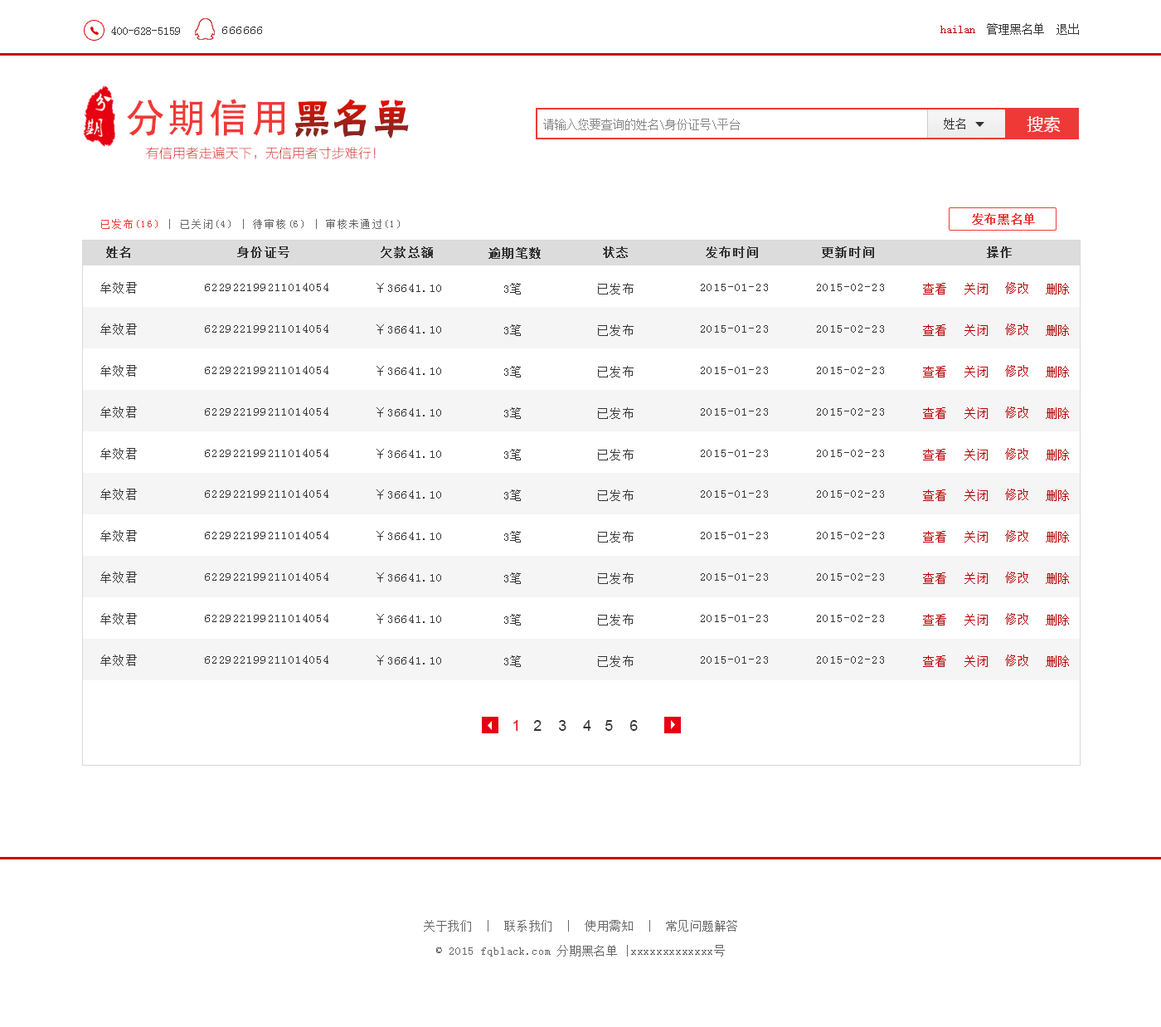
<style>
.page{position:relative;width:1161px;height:1027px;background:#ffffff}
.page>*{position:absolute;margin:0}
.t1{font:11.6px "SimSun";color:#333333}
.t2{font:11.6px "SimSun";color:#333333;font-weight:bold}
.t3{font:11.6px "SimSun";letter-spacing:0.1em;color:#333333}
.t4{font:11.6px "SimSun";color:#b60000}
.t5{font:39.8px "AdobeHeitiStd-Regular";letter-spacing:0.05em;color:#ef3936}
.t6{font:11.6px "SimSun";color:#888888}
.t7{font:16.6px "MicrosoftYaHei";color:#ffffff}
.t8{font:13.3px "FZLTCXHJW--GB1-0";color:#d90000}
.t9{font:10px "SimSun";letter-spacing:0.15em;color:#666666}
.t10{font:10px "SimSun";letter-spacing:0.15em;color:#ef3936}
.t11{font:11.6px "SimSun";letter-spacing:0.05em;color:#ef3936;font-weight:bold}
.t12{font:11.6px "SimSun";letter-spacing:0.1em;color:#333333;font-weight:bold}
.t13{font:11.6px "SimSun";letter-spacing:0.1em;color:#b60000}
.t14{font:14.9px "ArialMT";letter-spacing:0.1em;color:#e60012}
.t15{font:14.9px "ArialMT";letter-spacing:0.1em;color:#333333}
.t16{font:11.6px/24.9px "SimSun";letter-spacing:0.05em;color:#666666}
</style>
<div class="page">
<p class="t1" style="left:111px;top:27px;width:69px;height:8px"><span class="t2">     </span>400-628-5159</p>
<p class="t3" style="left:222px;top:27px;width:40px;height:7px">666666</p>
<p class="t1" style="left:941px;top:23px;width:138px;height:12px"><span class="t4">hailan </span> 管理黑名单  退出</p>
<p class="t5" style="left:127px;top:99px;width:158px;height:37px">分期信用</p>
<p class="t6" style="left:543px;top:119px;width:197px;height:11px">请输入您要查询的姓名\身份证号\平台</p>
<p class="t1" style="left:944px;top:118px;width:21px;height:11px">姓名</p>
<p class="t7" style="left:1027px;top:116px;width:34px;height:17px">搜索</p>
<p class="t8" style="left:146px;top:146px;width:230px;height:13px">有信用者走遍天下，无信用者寸步难行！</p>
<p class="t9" style="left:101px;top:219px;width:299px;height:10px"><span class="t10">已发布(16)</span> | 已关闭(4) | 待审核(6) | 审核未通过(1)</p>
<p class="t11" style="left:972px;top:213px;width:63px;height:12px">发布黑名单</p>
<p class="t12" style="left:106px;top:246px;width:24px;height:12px">姓名</p>
<p class="t12" style="left:237px;top:246px;width:52px;height:12px">身份证号</p>
<p class="t12" style="left:381px;top:246px;width:52px;height:12px">欠款总额</p>
<p class="t12" style="left:489px;top:247px;width:52px;height:12px">逾期笔数</p>
<p class="t12" style="left:603px;top:246px;width:25px;height:12px">状态</p>
<p class="t12" style="left:706px;top:246px;width:52px;height:12px">发布时间</p>
<p class="t12" style="left:822px;top:246px;width:52px;height:12px">更新时间</p>
<p class="t12" style="left:987px;top:246px;width:25px;height:12px">操作</p>
<p class="t3" style="left:100px;top:282px;width:37px;height:12px">牟效君</p>
<p class="t3" style="left:205px;top:283px;width:123px;height:8px">622922199211014054</p>
<p class="t3" style="left:377px;top:283px;width:64px;height:10px">￥36641.10</p>
<p class="t3" style="left:504px;top:283px;width:17px;height:11px">3笔</p>
<p class="t3" style="left:598px;top:283px;width:36px;height:11px">已发布</p>
<p class="t3" style="left:701px;top:284px;width:67px;height:7px">2015-01-23</p>
<p class="t3" style="left:817px;top:284px;width:67px;height:7px">2015-02-23</p>
<p class="t13" style="left:923px;top:283px;width:23px;height:11px">查看</p>
<p class="t13" style="left:965px;top:283px;width:23px;height:11px">关闭</p>
<p class="t13" style="left:1005px;top:282px;width:24px;height:12px">修改</p>
<p class="t13" style="left:1046px;top:283px;width:23px;height:11px">删除</p>
<p class="t3" style="left:100px;top:323px;width:37px;height:12px">牟效君</p>
<p class="t3" style="left:205px;top:324px;width:123px;height:9px">622922199211014054</p>
<p class="t3" style="left:377px;top:324px;width:64px;height:10px">￥36641.10</p>
<p class="t3" style="left:504px;top:324px;width:17px;height:12px">3笔</p>
<p class="t3" style="left:598px;top:324px;width:36px;height:12px">已发布</p>
<p class="t3" style="left:701px;top:325px;width:67px;height:8px">2015-01-23</p>
<p class="t3" style="left:817px;top:325px;width:67px;height:8px">2015-02-23</p>
<p class="t13" style="left:923px;top:324px;width:23px;height:12px">查看</p>
<p class="t13" style="left:965px;top:324px;width:23px;height:12px">关闭</p>
<p class="t13" style="left:1005px;top:323px;width:24px;height:12px">修改</p>
<p class="t13" style="left:1046px;top:324px;width:23px;height:12px">删除</p>
<p class="t3" style="left:100px;top:365px;width:37px;height:12px">牟效君</p>
<p class="t3" style="left:205px;top:366px;width:123px;height:8px">622922199211014054</p>
<p class="t3" style="left:377px;top:366px;width:64px;height:10px">￥36641.10</p>
<p class="t3" style="left:504px;top:366px;width:17px;height:11px">3笔</p>
<p class="t3" style="left:598px;top:366px;width:36px;height:11px">已发布</p>
<p class="t13" style="left:923px;top:366px;width:23px;height:11px">查看</p>
<p class="t13" style="left:965px;top:366px;width:23px;height:11px">关闭</p>
<p class="t13" style="left:1005px;top:365px;width:24px;height:12px">修改</p>
<p class="t13" style="left:1046px;top:366px;width:23px;height:11px">删除</p>
<p class="t3" style="left:701px;top:367px;width:67px;height:7px">2015-01-23</p>
<p class="t3" style="left:817px;top:367px;width:67px;height:7px">2015-02-23</p>
<p class="t3" style="left:100px;top:406px;width:37px;height:12px">牟效君</p>
<p class="t3" style="left:205px;top:407px;width:123px;height:9px">622922199211014054</p>
<p class="t3" style="left:377px;top:407px;width:64px;height:10px">￥36641.10</p>
<p class="t3" style="left:504px;top:407px;width:17px;height:12px">3笔</p>
<p class="t3" style="left:598px;top:407px;width:36px;height:12px">已发布</p>
<p class="t3" style="left:701px;top:408px;width:67px;height:8px">2015-01-23</p>
<p class="t3" style="left:817px;top:408px;width:67px;height:8px">2015-02-23</p>
<p class="t13" style="left:923px;top:407px;width:23px;height:12px">查看</p>
<p class="t13" style="left:965px;top:407px;width:23px;height:12px">关闭</p>
<p class="t13" style="left:1005px;top:406px;width:24px;height:12px">修改</p>
<p class="t13" style="left:1046px;top:407px;width:23px;height:12px">删除</p>
<p class="t3" style="left:100px;top:448px;width:37px;height:12px">牟效君</p>
<p class="t3" style="left:205px;top:449px;width:123px;height:8px">622922199211014054</p>
<p class="t3" style="left:377px;top:449px;width:64px;height:10px">￥36641.10</p>
<p class="t3" style="left:504px;top:449px;width:17px;height:11px">3笔</p>
<p class="t3" style="left:598px;top:449px;width:36px;height:11px">已发布</p>
<p class="t3" style="left:701px;top:450px;width:67px;height:7px">2015-01-23</p>
<p class="t3" style="left:817px;top:450px;width:67px;height:7px">2015-02-23</p>
<p class="t13" style="left:923px;top:449px;width:23px;height:11px">查看</p>
<p class="t13" style="left:965px;top:449px;width:23px;height:11px">关闭</p>
<p class="t13" style="left:1005px;top:448px;width:24px;height:12px">修改</p>
<p class="t13" style="left:1046px;top:449px;width:23px;height:11px">删除</p>
<p class="t3" style="left:100px;top:489px;width:37px;height:11px">牟效君</p>
<p class="t3" style="left:205px;top:489px;width:123px;height:9px">622922199211014054</p>
<p class="t3" style="left:377px;top:489px;width:64px;height:10px">￥36641.10</p>
<p class="t3" style="left:504px;top:489px;width:17px;height:12px">3笔</p>
<p class="t3" style="left:598px;top:489px;width:36px;height:12px">已发布</p>
<p class="t3" style="left:701px;top:490px;width:67px;height:8px">2015-01-23</p>
<p class="t3" style="left:817px;top:490px;width:67px;height:8px">2015-02-23</p>
<p class="t13" style="left:923px;top:489px;width:23px;height:12px">查看</p>
<p class="t13" style="left:965px;top:489px;width:23px;height:12px">关闭</p>
<p class="t13" style="left:1005px;top:489px;width:24px;height:11px">修改</p>
<p class="t13" style="left:1046px;top:489px;width:23px;height:12px">删除</p>
<p class="t3" style="left:100px;top:530px;width:37px;height:12px">牟效君</p>
<p class="t3" style="left:205px;top:531px;width:123px;height:8px">622922199211014054</p>
<p class="t3" style="left:377px;top:531px;width:64px;height:10px">￥36641.10</p>
<p class="t3" style="left:504px;top:531px;width:17px;height:11px">3笔</p>
<p class="t3" style="left:598px;top:531px;width:36px;height:11px">已发布</p>
<p class="t3" style="left:701px;top:532px;width:67px;height:7px">2015-01-23</p>
<p class="t3" style="left:817px;top:532px;width:67px;height:7px">2015-02-23</p>
<p class="t13" style="left:923px;top:531px;width:23px;height:11px">查看</p>
<p class="t13" style="left:965px;top:531px;width:23px;height:11px">关闭</p>
<p class="t13" style="left:1005px;top:530px;width:24px;height:12px">修改</p>
<p class="t13" style="left:1046px;top:531px;width:23px;height:11px">删除</p>
<p class="t3" style="left:100px;top:571px;width:37px;height:12px">牟效君</p>
<p class="t3" style="left:205px;top:572px;width:123px;height:9px">622922199211014054</p>
<p class="t3" style="left:377px;top:572px;width:64px;height:10px">￥36641.10</p>
<p class="t3" style="left:504px;top:572px;width:17px;height:12px">3笔</p>
<p class="t3" style="left:598px;top:572px;width:36px;height:12px">已发布</p>
<p class="t3" style="left:701px;top:573px;width:67px;height:8px">2015-01-23</p>
<p class="t3" style="left:817px;top:573px;width:67px;height:8px">2015-02-23</p>
<p class="t13" style="left:923px;top:572px;width:23px;height:12px">查看</p>
<p class="t13" style="left:965px;top:572px;width:23px;height:12px">关闭</p>
<p class="t13" style="left:1005px;top:571px;width:24px;height:12px">修改</p>
<p class="t13" style="left:1046px;top:572px;width:23px;height:12px">删除</p>
<p class="t3" style="left:100px;top:613px;width:37px;height:12px">牟效君</p>
<p class="t3" style="left:205px;top:614px;width:123px;height:8px">622922199211014054</p>
<p class="t3" style="left:377px;top:614px;width:64px;height:10px">￥36641.10</p>
<p class="t3" style="left:504px;top:614px;width:17px;height:11px">3笔</p>
<p class="t3" style="left:598px;top:614px;width:36px;height:11px">已发布</p>
<p class="t3" style="left:701px;top:615px;width:67px;height:7px">2015-01-23</p>
<p class="t3" style="left:817px;top:615px;width:67px;height:7px">2015-02-23</p>
<p class="t13" style="left:923px;top:614px;width:23px;height:11px">查看</p>
<p class="t13" style="left:965px;top:614px;width:23px;height:11px">关闭</p>
<p class="t13" style="left:1005px;top:613px;width:24px;height:12px">修改</p>
<p class="t13" style="left:1046px;top:614px;width:23px;height:11px">删除</p>
<p class="t3" style="left:100px;top:654px;width:37px;height:12px">牟效君</p>
<p class="t3" style="left:205px;top:655px;width:123px;height:9px">622922199211014054</p>
<p class="t3" style="left:377px;top:655px;width:64px;height:10px">￥36641.10</p>
<p class="t3" style="left:504px;top:655px;width:17px;height:12px">3笔</p>
<p class="t3" style="left:598px;top:655px;width:36px;height:12px">已发布</p>
<p class="t3" style="left:701px;top:656px;width:67px;height:8px">2015-01-23</p>
<p class="t3" style="left:817px;top:656px;width:67px;height:8px">2015-02-23</p>
<p class="t13" style="left:923px;top:655px;width:23px;height:12px">查看</p>
<p class="t13" style="left:965px;top:655px;width:23px;height:12px">关闭</p>
<p class="t13" style="left:1005px;top:654px;width:24px;height:12px">修改</p>
<p class="t13" style="left:1046px;top:655px;width:23px;height:12px">删除</p>
<p class="t14" style="left:513px;top:720px;width:5px;height:11px">1</p>
<p class="t15" style="left:533px;top:720px;width:9px;height:11px">2</p>
<p class="t15" style="left:559px;top:720px;width:8px;height:11px">3</p>
<p class="t15" style="left:583px;top:720px;width:8px;height:11px">4</p>
<p class="t15" style="left:606px;top:720px;width:7px;height:11px">5</p>
<p class="t15" style="left:630px;top:720px;width:8px;height:11px">6</p>
<p class="t16" style="left:424px;top:920px;width:313px;height:36px;text-align:center">关于我们  |  联系我们  |  使用需知  |  常见问题解答<br>© 2015 fqblack.com 分期黑名单 |xxxxxxxxxxxxx号</p>
</div>
